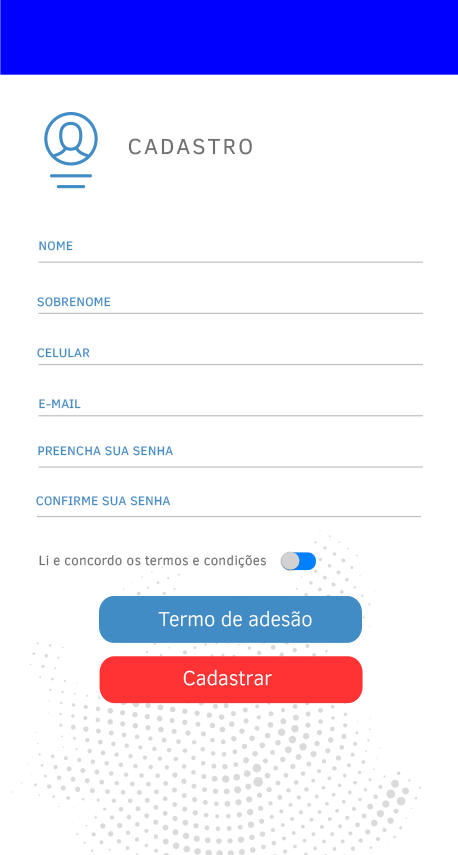
<style>
.page{position:relative;width:458px;height:855px;background:#ffffff}
.page>*{position:absolute;margin:0}
.t1{font:22.3px "ClearSans";letter-spacing:0.1em;color:#707072}
.t2{font:12.5px "ClearSans";letter-spacing:0.02em;color:#428cc5}
.t3{font:13.4px "ClearSans";letter-spacing:0.02em;color:#707070}
.t4{font:20.5px "ClearSans-Light";color:#ffffff}
</style>
<div class="page">
<p class="t1" style="left:128px;top:138px;width:124px;height:17px">CADASTRO</p>
<p class="t2" style="left:39px;top:241px;width:34px;height:10px">NOME</p>
<p class="t2" style="left:37px;top:297px;width:74px;height:10px">SOBRENOME</p>
<p class="t2" style="left:37px;top:348px;width:53px;height:10px">CELULAR</p>
<p class="t2" style="left:39px;top:399px;width:42px;height:10px">E-MAIL</p>
<p class="t2" style="left:38px;top:446px;width:135px;height:10px">PREENCHA SUA SENHA</p>
<p class="t2" style="left:36px;top:496px;width:135px;height:10px">CONFIRME SUA SENHA</p>
<p class="t3" style="left:39px;top:555px;width:227px;height:13px">Li e concordo os termos e condições</p>
<p class="t4" style="left:158px;top:610px;width:154px;height:17px">Termo de adesão</p>
<p class="t4" style="left:183px;top:669px;width:89px;height:17px">Cadastrar</p>
</div>
